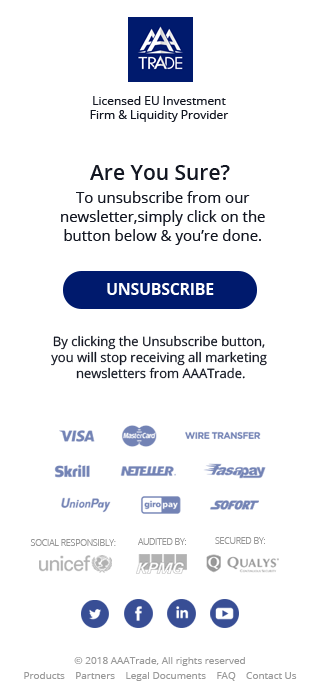
<style>
.page{position:relative;width:320px;height:700px;background:#ffffff}
.page>*{position:absolute;margin:0}
.t1{font:12px/14px "OpenSans-Regular";color:#131722}
.t2{font:21px "OpenSans-SemiBold";color:#131722}
.t3{font:15px/19px "OpenSans-Regular";color:#131722}
.t4{font:16px "OpenSans-Bold";letter-spacing:-0.02em;color:#ffffff}
.t5{font:13px/16px "OpenSans-Regular";color:#131722}
.t6{font:8.5px "OpenSans-Light";color:#989898;text-transform:uppercase}
.t7{font:10px "OpenSans-Regular";color:#9a9a9a}
</style>
<div class="page">
<p class="t1" style="left:90px;top:96px;width:139px;height:26px;text-align:center">Licensed EU Investment<br>Firm &amp; Liquidity Provider</p>
<p class="t2" style="left:90px;top:165px;width:140px;height:15px">Are You Sure?</p>
<p class="t3" style="left:61px;top:191px;width:204px;height:54px;text-align:center">To unsubscribe from our <br>newsletter,simply click on the <br>button below &amp; you’re done.</p>
<p class="t4" style="left:107px;top:283px;width:107px;height:12px">UNSUBSCRIBE</p>
<p class="t5" style="left:51px;top:335px;width:216px;height:44px;text-align:center">By clicking the Unsubscribe button, <br>you will stop receiving all marketing <br>newsletters from AAATrade.</p>
<p class="t6" style="left:30px;top:539px;width:86px;height:7px">Social responsibly:</p>
<p class="t6" style="left:138px;top:538px;width:48px;height:7px">AUDITED BY:</p>
<p class="t6" style="left:215px;top:537px;width:50px;height:7px">SECURED BY:</p>
<p class="t7" style="left:74px;top:657px;width:171px;height:9px">© 2018 AAATrade, All rights reserved</p>
<p class="t7" style="left:24px;top:672px;width:273px;height:9px">Products    Partners    Legal Documents    FAQ    Contact Us</p>
</div>
